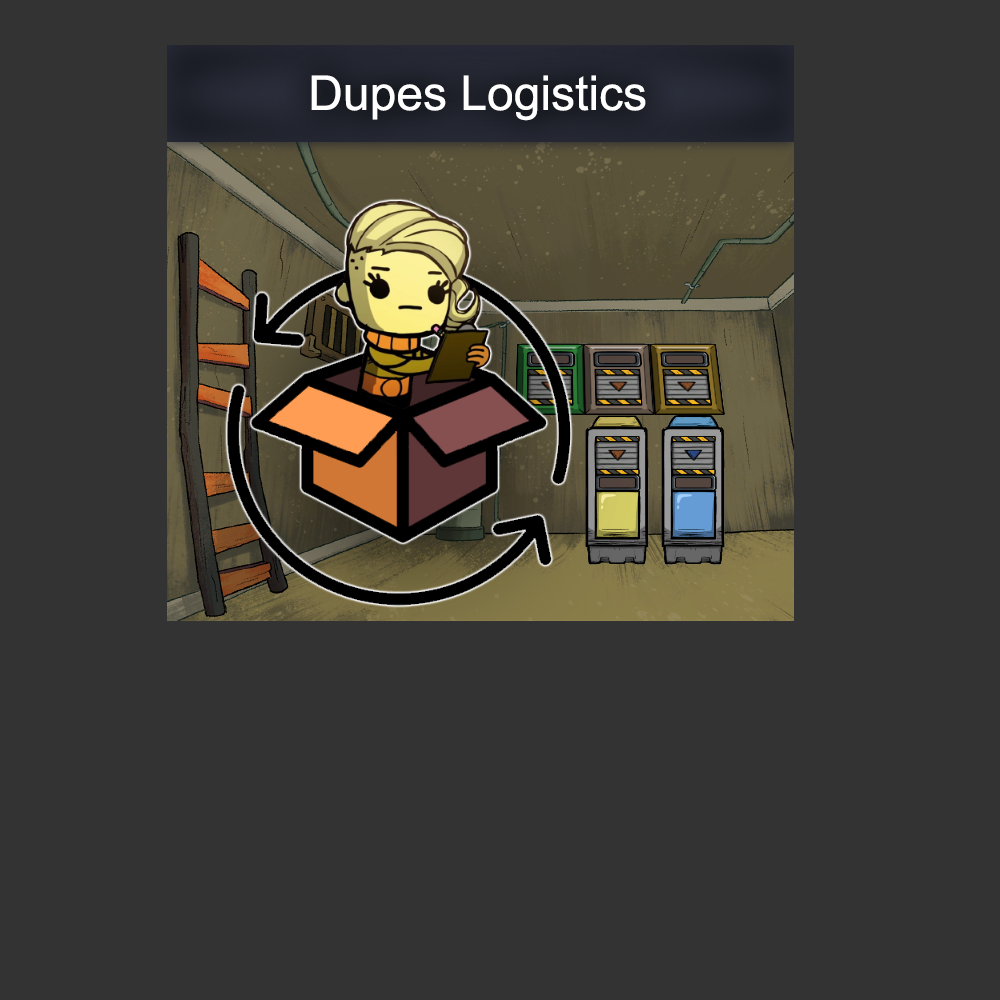
<style>
.page{position:relative;width:1000px;height:1000px;background:#333333}
.page>*{position:absolute;margin:0}
.t1{font:48px "ArialMT";color:#ffffff}
</style>
<div class="page">
<p class="t1" style="left:311px;top:75px;width:335px;height:46px">Dupes Logistics</p>
</div>
